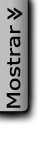
<style>
.page{position:relative;width:50px;height:150px;background:#ffffff}
.page>*{position:absolute;margin:0}
.t1{font:25.4px "MSReferenceSansSerif";color:#000000;scale:1.21 1}
.t2{font:18px "MSReferenceSansSerif";color:#000000;scale:1.23 1}
</style>
<div class="page">
<p class="t1" style="left:7px;top:7px;width:16px;height:13px">»</p>
<p class="t2" style="left:6px;top:25px;width:15px;height:83px;rotate:-90deg">Mostrar</p>
</div>
